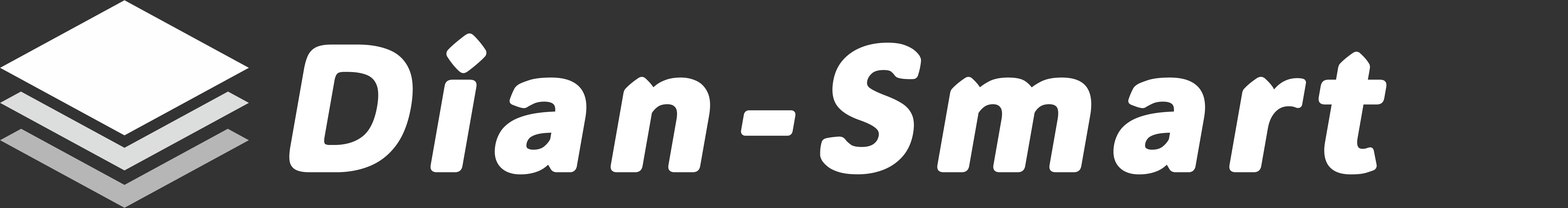
<style>
.page{position:relative;width:1568px;height:208px;background:#333333}
.page>*{position:absolute;margin:0}
.t1{font:175.2px "ADLaMDisplay-Regular";letter-spacing:0.06em;color:#ffffff;font-weight:bold;font-style:italic}
</style>
<div class="page">
<p class="t1" style="left:289px;top:33px;width:1097px;height:141px">Dian-Smart</p>
</div>
